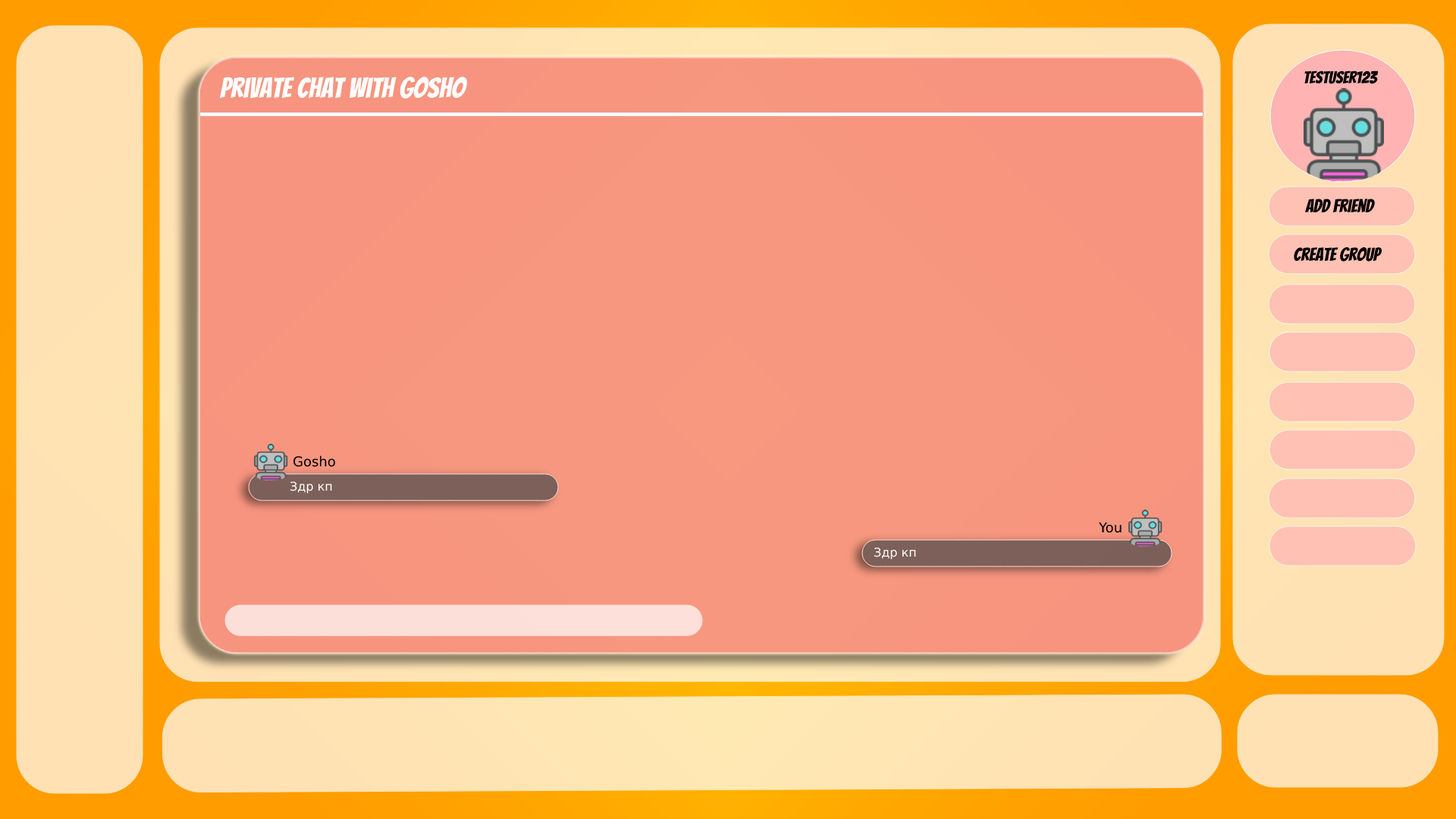
<style>
.page{position:relative;width:1456px;height:819px}
.page>*{position:absolute;margin:0}
.t1{font:28.1px "Bangers-Regular";color:#ffffff}
.t2{font:16.9px "Bangers-Regular";color:#000000}
.t3{font:18.2px "Bangers-Regular";color:#000000}
.t4{font:13.6px "DejaVuSans";color:#000000}
.t5{font:12.1px "DejaVuSans";color:#ffffff}
</style>
<div class="page">
<p class="t1" style="left:219px;top:77px;width:248px;height:22px">Private chat with Gosho</p>
<p class="t2" style="left:1304px;top:71px;width:75px;height:13px">testUser123</p>
<p class="t3" style="left:1304px;top:199px;width:71px;height:14px">Add friend</p>
<p class="t3" style="left:1294px;top:247px;width:88px;height:15px">Create group</p>
<p class="t4" style="left:293px;top:456px;width:42px;height:11px">Gosho</p>
<p class="t5" style="left:290px;top:482px;width:42px;height:12px">Здр кп</p>
<p class="t4" style="left:1098px;top:522px;width:24px;height:11px">You</p>
<p class="t5" style="left:874px;top:548px;width:42px;height:12px">Здр кп</p>
</div>
